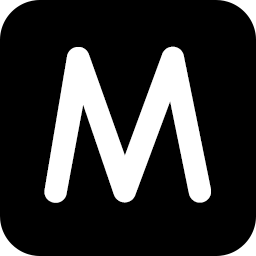
<style>
.page{position:relative;width:256px;height:256px;background:#000000}
.page>*{position:absolute;margin:0}
.t1{font:222px "Arciform";color:#ffffff}
</style>
<div class="page">
<p class="t1" style="left:44px;top:46px;width:167px;height:157px">M</p>
</div>
